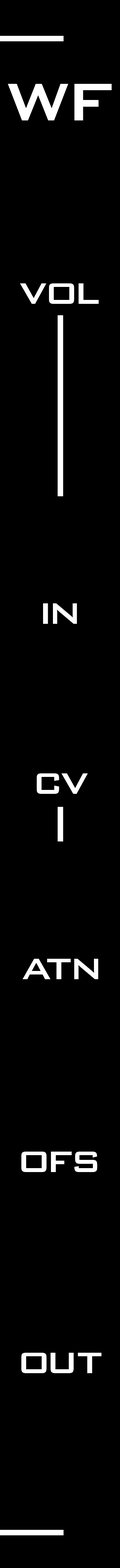
<style>
.page{position:relative;width:120px;height:1568px;background:#000000}
.page>*{position:absolute;margin:0}
.t1{font:70.8px "BankGothicBT-Medium";letter-spacing:-0.08em;color:#ffffff}
.t2{font:39.4px "BankGothicBT-Medium";letter-spacing:-0.06em;color:#ffffff}
.t3{font:39.4px "BankGothicBT-Medium";letter-spacing:-0.14em;color:#ffffff}
.t4{font:39.4px "BankGothicBT-Medium";color:#ffffff}
.t5{font:39.4px "BankGothicBT-Medium";letter-spacing:-0.08em;color:#ffffff}
.t6{font:39.4px "BankGothicBT-Medium";letter-spacing:-0.04em;color:#ffffff}
</style>
<div class="page">
<p class="t1" style="left:8px;top:84px;width:103px;height:36px">WF</p>
<p class="t2" style="left:20px;top:283px;width:78px;height:21px">V<span class="t3">O</span><span class="t4">L</span></p>
<p class="t3" style="left:43px;top:603px;width:34px;height:21px">IN</p>
<p class="t2" style="left:37px;top:773px;width:51px;height:21px">CV</p>
<p class="t2" style="left:22px;top:959px;width:76px;height:20px">AT<span class="t4">N</span></p>
<p class="t3" style="left:21px;top:1152px;width:76px;height:20px">O<span class="t5">F</span><span class="t4">S</span></p>
<p class="t3" style="left:21px;top:1353px;width:80px;height:20px">O<span class="t6">U</span><span class="t4">T</span></p>
</div>
